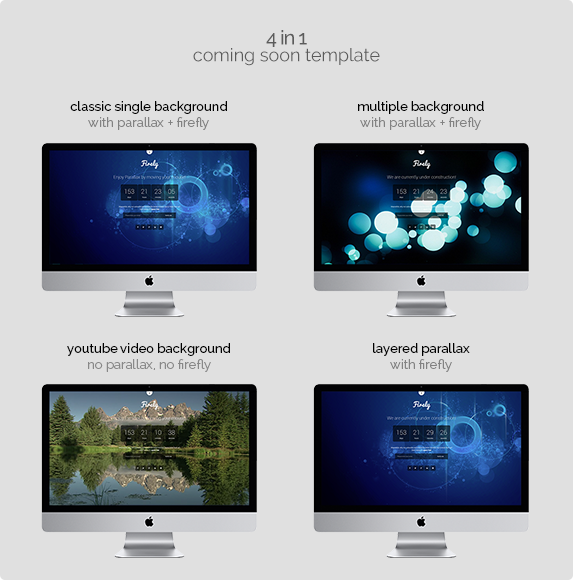
<style>
.page{position:relative;width:573px;height:580px;background:#e0e0e0}
.page>*{position:absolute;margin:0}
.t1{font:20px "Raleway-Medium";letter-spacing:-0.05em;color:#5b5b5b}
.t2{font:18px "Raleway-Regular";color:#5b5b5b}
.t3{font:13px "Raleway-Medium";color:#000000}
.t4{font:13px "Raleway-Regular";color:#828282}
.t5{font:13px "Raleway-Regular";color:#888888}
</style>
<div class="page">
<p class="t1" style="left:266px;top:30px;width:41px;height:17px">4 in 1</p>
<p class="t2" style="left:193px;top:48px;width:187px;height:18px">coming soon template</p>
<p class="t3" style="left:70px;top:101px;width:157px;height:29px;text-align:center">classic single background<br><span class="t4">with parallax + firefly</span></p>
<p class="t4" style="left:358px;top:101px;width:126px;height:29px;text-align:center"><span class="t3">multiple background<br></span>with parallax + firefly</p>
<p class="t3" style="left:67px;top:343px;width:163px;height:29px;text-align:center">youtube video background<br><span class="t5">no parallax, no firefly</span></p>
<p class="t3" style="left:373px;top:343px;width:97px;height:29px;text-align:center">layered parallax<br><span class="t4">with firefly</span></p>
</div>
